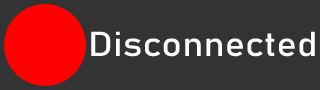
<style>
.page{position:relative;width:320px;height:90px;background:#333333}
.page>*{position:absolute;margin:0}
.t1{font:34.3px "Bahnschrift";color:#ffffff;scale:1.11 1}
</style>
<div class="page">
<p class="t1" style="left:91px;top:31px;width:224px;height:26px">Disconnected</p>
</div>
